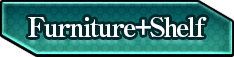
<style>
.page{position:relative;width:234px;height:57px}
.page>*{position:absolute;margin:0}
.t1{font:27px "RyuminPro-ExBold";letter-spacing:-0.08em;color:#ffffff}
</style>
<div class="page">
<p class="t1" style="left:28px;top:17px;width:179px;height:20px">Furniture+Shelf</p>
</div>
